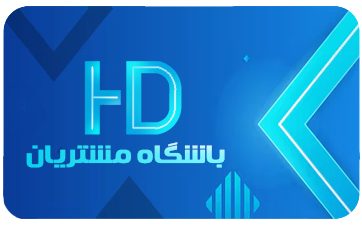
<style>
.page{position:relative;width:362px;height:225px}
.page>*{position:absolute;margin:0}
.t1{font:24.9px "FarFanni"}
</style>
<div class="page">
<p class="t1" style="left:26px;top:142px;width:199px;height:26px">باشگاه مشتریان</p>
</div>
